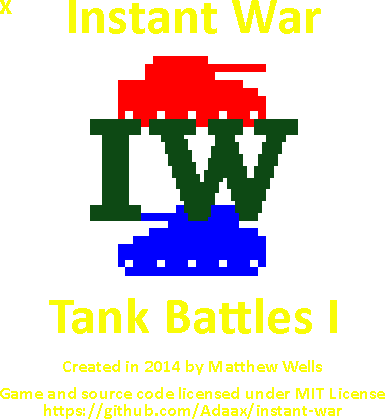
<style>
.page{position:relative;width:385px;height:419px;background:#ffffff}
.page>*{position:absolute;margin:0}
.t1{font:30px "Calibri-Bold";letter-spacing:0.01em;color:#f9fc07}
.t2{font:52px "Calibri-Bold";letter-spacing:0.01em;color:#f9fc07}
.t3{font:18px "Calibri-Bold";letter-spacing:0.01em;color:#f9fc07}
</style>
<div class="page">
<p class="t1" style="left:0px;top:0px;width:12px;height:14px">x</p>
<p class="t2" style="left:69px;top:0px;width:252px;height:34px">Instant War</p>
<p class="t2" style="left:49px;top:298px;width:288px;height:36px">Tank Battles I</p>
<p class="t3" style="left:63px;top:360px;width:259px;height:15px">Created in 2014 by Matthew Wells</p>
<p class="t3" style="left:0px;top:387px;width:385px;height:12px">Game and source code licensed under MIT License</p>
<p class="t3" style="left:44px;top:403px;width:298px;height:16px">https://github.com/Adaax/instant-war</p>
</div>
